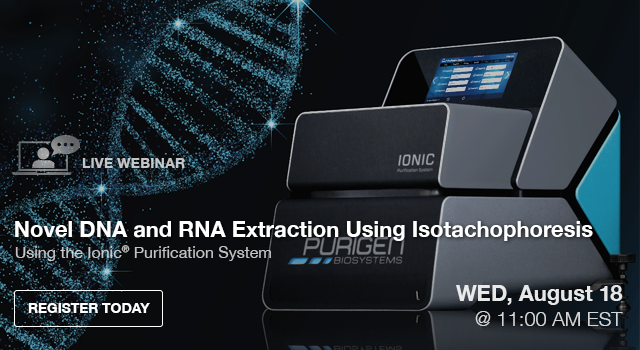
<style>
.page{position:relative;width:640px;height:350px}
.page>*{position:absolute;margin:0}
.t1{font:14.4px "HelveticaNeue-Bold";color:#c3c3c4;text-transform:uppercase}
.t2{font:22px "HelveticaNeue-Bold";color:#ffffff}
.t3{font:16px "HelveticaNeue";color:#c3c3c3}
.t4{font:22px "HelveticaNeue-Bold";color:#e7e7e7}
.t5{font:14.1px "HelveticaNeue-Bold";letter-spacing:-0.01em;color:#ffffff;text-transform:uppercase}
.t6{font:20px "HelveticaNeue-Light";color:#d5d6d6}
</style>
<div class="page">
<p class="t1" style="left:82px;top:158px;width:103px;height:10px">Live Webinar</p>
<p class="t2" style="left:15px;top:221px;width:578px;height:20px">Novel DNA and RNA Extraction Using Isotachophoresis</p>
<p class="t3" style="left:15px;top:245px;width:256px;height:16px">Using the Ionic® Purification System</p>
<p class="t4" style="left:456px;top:285px;width:167px;height:20px">WED, August 18</p>
<p class="t5" style="left:28px;top:303px;width:122px;height:10px">Register Today</p>
<p class="t6" style="left:475px;top:311px;width:148px;height:15px">@ 11:00 AM EST</p>
</div>
